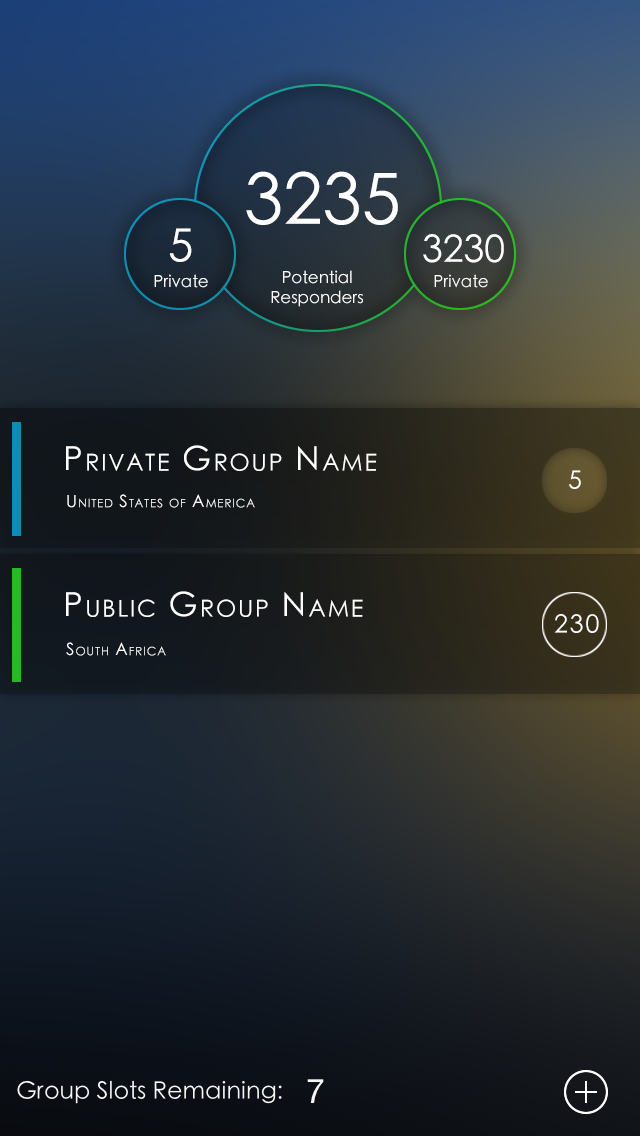
<style>
.page{position:relative;width:640px;height:1136px}
.page>*{position:absolute;margin:0}
.t1{font:70.8px "STHeitiSC-Light";color:#ffffff}
.t2{font:45.8px "STHeitiSC-Light";color:#ffffff}
.t3{font:37.5px "STHeitiSC-Light";color:#ffffff}
.t4{font:16.7px "STHeitiSC-Light";color:#ffffff}
.t5{font:33.3px "STHeitiSC-Light";letter-spacing:0.075em;color:#ffffff;font-variant:small-caps}
.t6{font:25px "STHeitiSC-Light";letter-spacing:0.075em;color:#ffffff;font-variant:small-caps}
.t7{font:16.7px "STHeitiSC-Light";letter-spacing:0.075em;color:#ffffff;font-variant:small-caps}
</style>
<div class="page">
<p class="t1" style="left:246px;top:171px;width:152px;height:54px">3235</p>
<p class="t2" style="left:169px;top:228px;width:23px;height:34px">5</p>
<p class="t3" style="left:423px;top:234px;width:81px;height:29px">3230</p>
<p class="t4" style="left:271px;top:270px;width:92px;height:37px;text-align:center">Potential<br>Responders</p>
<p class="t4" style="left:154px;top:274px;width:54px;height:14px">Private</p>
<p class="t4" style="left:434px;top:274px;width:54px;height:14px">Private</p>
<p class="t5" style="left:66px;top:445px;width:311px;height:26px">Private Group Name</p>
<p class="t6" style="left:569px;top:470px;width:12px;height:19px">5</p>
<p class="t7" style="left:67px;top:494px;width:188px;height:14px">United States of America</p>
<p class="t5" style="left:66px;top:591px;width:297px;height:26px">Public Group Name</p>
<p class="t6" style="left:554px;top:614px;width:45px;height:19px">230</p>
<p class="t7" style="left:66px;top:642px;width:100px;height:14px">South Africa</p>
</div>
